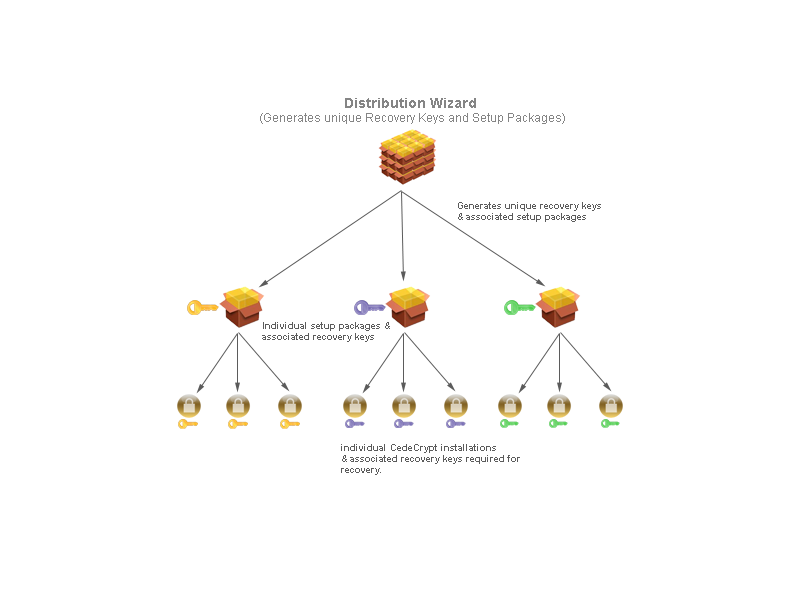
<style>
.page{position:relative;width:800px;height:600px;background:#ffffff}
.page>*{position:absolute;margin:0}
.t1{font:12px "ArialMT";color:#858585}
.t2{font:14px "Arial-BoldMT";color:#858585}
.t3{font:9px "Arial-BoldMT";color:#5b5b5b}
</style>
<div class="page">
<p class="t1" style="left:260px;top:98px;width:305px;height:26px;text-align:center"><span class="t2">Distribution Wizard</span> <br>(Generates unique Recovery Keys and Setup Packages)</p>
<p class="t3" style="left:458px;top:202px;width:143px;height:20px">Generates unique recovery keys<br>&amp; associated setup packages</p>
<p class="t3" style="left:262px;top:322px;width:128px;height:20px">Individual setup packages &amp;<br>associated recovery keys</p>
<p class="t3" style="left:341px;top:444px;width:179px;height:31px">individual CedeCrypt installations<br>&amp; associated recovery keys required for<br>recovery.</p>
</div>
